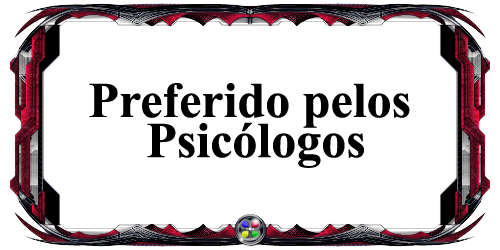
<style>
.page{position:relative;width:500px;height:250px;background:#ffffff}
.page>*{position:absolute;margin:0}
.t1{font:50px/40px "TimesNewRomanPS-BoldMT";color:#000000}
</style>
<div class="page">
<p class="t1" style="left:89px;top:83px;width:321px;height:85px;text-align:center">Preferido pelos <br>Psicólogos</p>
</div>
